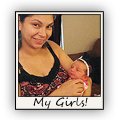
<style>
.page{position:relative;width:120px;height:120px}
.page>*{position:absolute;margin:0}
.t1{font:11.2px "SegoeScript";color:#000000}
</style>
<div class="page">
<p class="t1" style="left:33px;top:97px;width:55px;height:12px">My Girls!</p>
</div>
